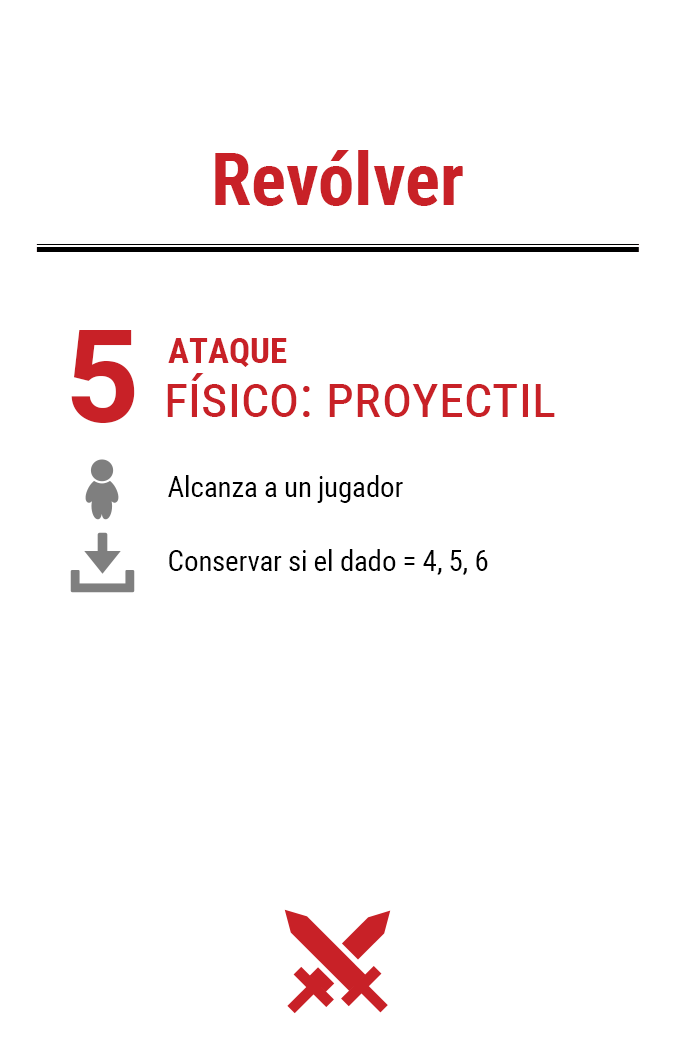
<style>
.page{position:relative;width:675px;height:1050px;background:#ffffff}
.page>*{position:absolute;margin:0}
.t1{font:72.9px "RobotoCondensed-Bold";color:#c82127}
.t2{font:130px "Roboto-Bold";letter-spacing:-0.06em;color:#c82127}
.t3{font:35px "RobotoCondensed-Bold";color:#c82127}
.t4{font:58.3px "RobotoCondensed-Regular";color:#c82127;font-variant:small-caps}
.t5{font:29.2px "RobotoCondensed-Regular";letter-spacing:-0.01em;color:#000000}
</style>
<div class="page">
<p class="t1" style="left:215px;top:150px;width:248px;height:56px">Revólver</p>
<p class="t2" style="left:71px;top:330px;width:64px;height:93px">5</p>
<p class="t3" style="left:168px;top:338px;width:119px;height:29px">ATAQUE</p>
<p class="t4" style="left:167px;top:373px;width:388px;height:44px">físico: proyectil</p>
<p class="t5" style="left:168px;top:475px;width:235px;height:28px">Alcanza a un jugador</p>
<p class="t5" style="left:169px;top:549px;width:319px;height:26px">Conservar si el dado = 4, 5, 6</p>
</div>
